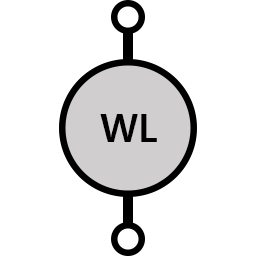
<style>
.page{position:relative;width:256px;height:256px;background:#ffffff}
.page>*{position:absolute;margin:0}
.t1{font:37.5px "MalgunGothicBold";color:#000000}
</style>
<div class="page">
<p class="t1" style="left:100px;top:114px;width:57px;height:28px">WL</p>
</div>
